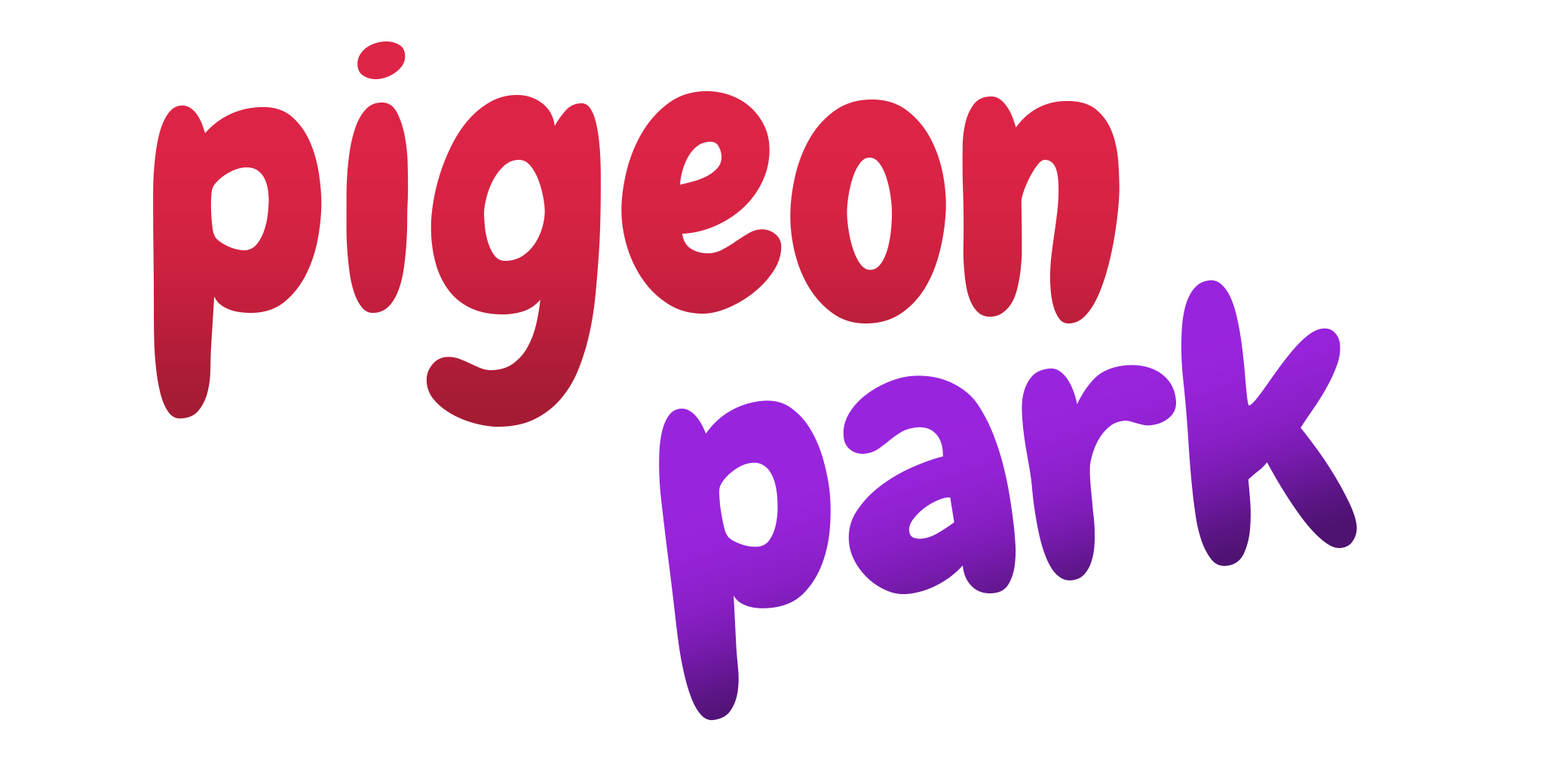
<style>
.page{position:relative;width:1544px;height:772px;background:#ffffff}
.page>*{position:absolute;margin:0}
.t1{font:377px "Chewy-Regular";color:#dd2446}
.t2{font:377px "Chewy-Regular";color:#9924dd}
</style>
<div class="page">
<p class="t1" style="left:153px;top:41px;width:967px;height:386px">pigeon</p>
<p class="t2" style="left:659px;top:280px;width:698px;height:441px;rotate:-7deg">park</p>
</div>
